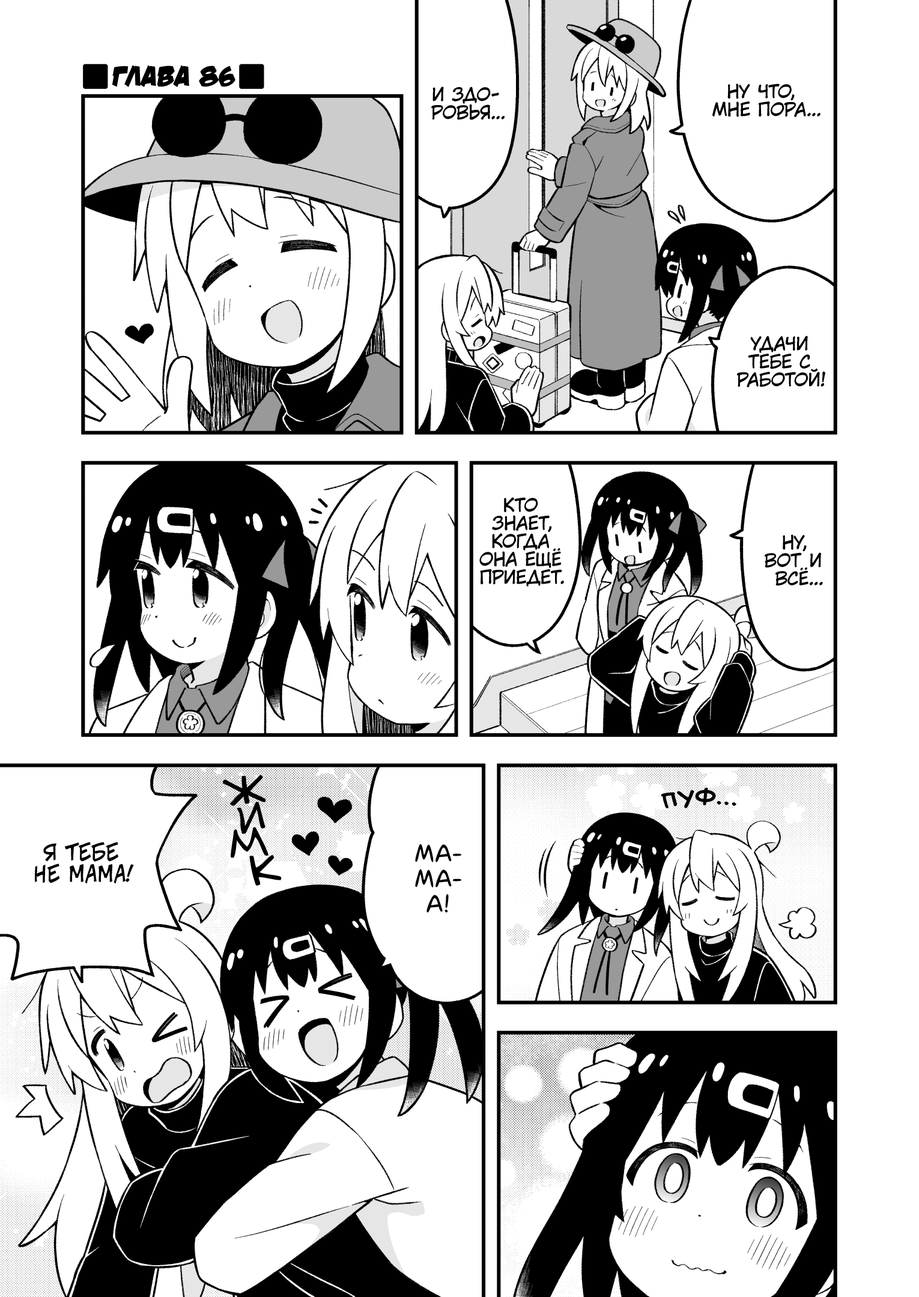
<style>
.page{position:relative;width:919px;height:1297px;background:#ffffff}
.page>*{position:absolute;margin:0}
.t1{font:28.8px "v_DamnNoisyKids";color:#000000;text-transform:uppercase}
.t2{font:18px "KuraiVoice2";color:#000000;text-transform:uppercase}
.t3{font:39.6px "v_Augie";color:#000000;text-transform:uppercase}
.t4{font:28.8px "v_BillyTheFlyingRobotBBLC";color:#000000;text-transform:uppercase}
.t5{font:21.6px "v_CCJeffCampbell";color:#000000;text-transform:uppercase}
.t6{font:25.2px "laCartoonerie";color:#000000;text-transform:uppercase}
</style>
<div class="page">
<p class="t1" style="left:112px;top:65px;width:123px;height:22px">Глава 86</p>
<p class="t2" style="left:431px;top:86px;width:74px;height:34px;text-align:center">И здо-<br>ровья...</p>
<p class="t2" style="left:712px;top:83px;width:109px;height:34px;text-align:center">Ну что,<br>мне пора...</p>
<p class="t2" style="left:737px;top:336px;width:88px;height:51px;text-align:center">Удачи<br>тебе с<br>работой!</p>
<p class="t2" style="left:479px;top:497px;width:85px;height:90px;text-align:center">Кто<br>знает,<br>когда<br>она ещё<br>приедет.</p>
<p class="t2" style="left:765px;top:535px;width:58px;height:51px;text-align:center">Ну,<br>вот и<br>всё...</p>
<p class="t3" style="left:223px;top:775px;width:43px;height:31px;rotate:-8deg">ж</p>
<p class="t4" style="left:661px;top:788px;width:75px;height:21px;rotate:-2deg">пуф...</p>
<p class="t3" style="left:237px;top:803px;width:28px;height:31px;rotate:-11deg">и</p>
<p class="t3" style="left:231px;top:828px;width:37px;height:30px;rotate:-9deg">м</p>
<p class="t5" style="left:35px;top:842px;width:99px;height:42px;text-align:center">Я тебе<br>не мама!</p>
<p class="t6" style="left:415px;top:844px;width:46px;height:69px;text-align:center">Ма-<br>ма-<br>а!</p>
<p class="t3" style="left:250px;top:855px;width:31px;height:30px;rotate:-14deg">к</p>
</div>
